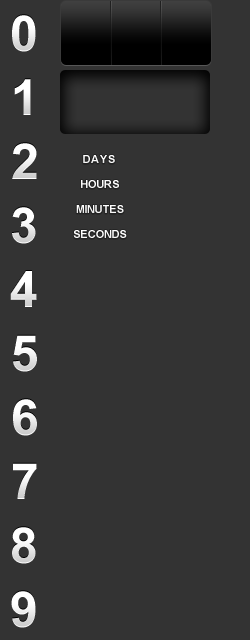
<style>
.page{position:relative;width:250px;height:640px;background:#333333}
.page>*{position:absolute;margin:0}
.t1{font:50px "Arial-BoldMT";letter-spacing:0.1em;color:#ffffff}
.t2{font:50px "Arial-BoldMT";letter-spacing:0.1em}
.t3{font:11px "Arial-BoldMT";letter-spacing:0.1em;color:#ffffff}
.t4{font:50px "Arial-BoldMT";letter-spacing:0.1em;color:#eeeeee}
</style>
<div class="page">
<p class="t1" style="left:12px;top:14px;width:24px;height:37px">0</p>
<p class="t1" style="left:14px;top:78px;width:17px;height:36px">1</p>
<p class="t2" style="left:12px;top:142px;width:25px;height:36px">2</p>
<p class="t3" style="left:83px;top:155px;width:32px;height:8px">DAYS</p>
<p class="t3" style="left:81px;top:180px;width:38px;height:8px">HOURS</p>
<p class="t2" style="left:12px;top:206px;width:24px;height:37px">3</p>
<p class="t3" style="left:76px;top:205px;width:48px;height:8px">MINUTES</p>
<p class="t3" style="left:73px;top:230px;width:54px;height:8px">SECONDS</p>
<p class="t4" style="left:10px;top:270px;width:27px;height:36px">4</p>
<p class="t2" style="left:13px;top:334px;width:24px;height:37px">5</p>
<p class="t4" style="left:13px;top:398px;width:24px;height:37px">6</p>
<p class="t1" style="left:13px;top:462px;width:24px;height:36px">7</p>
<p class="t4" style="left:12px;top:526px;width:24px;height:37px">8</p>
<p class="t1" style="left:11px;top:590px;width:25px;height:37px">9</p>
</div>
